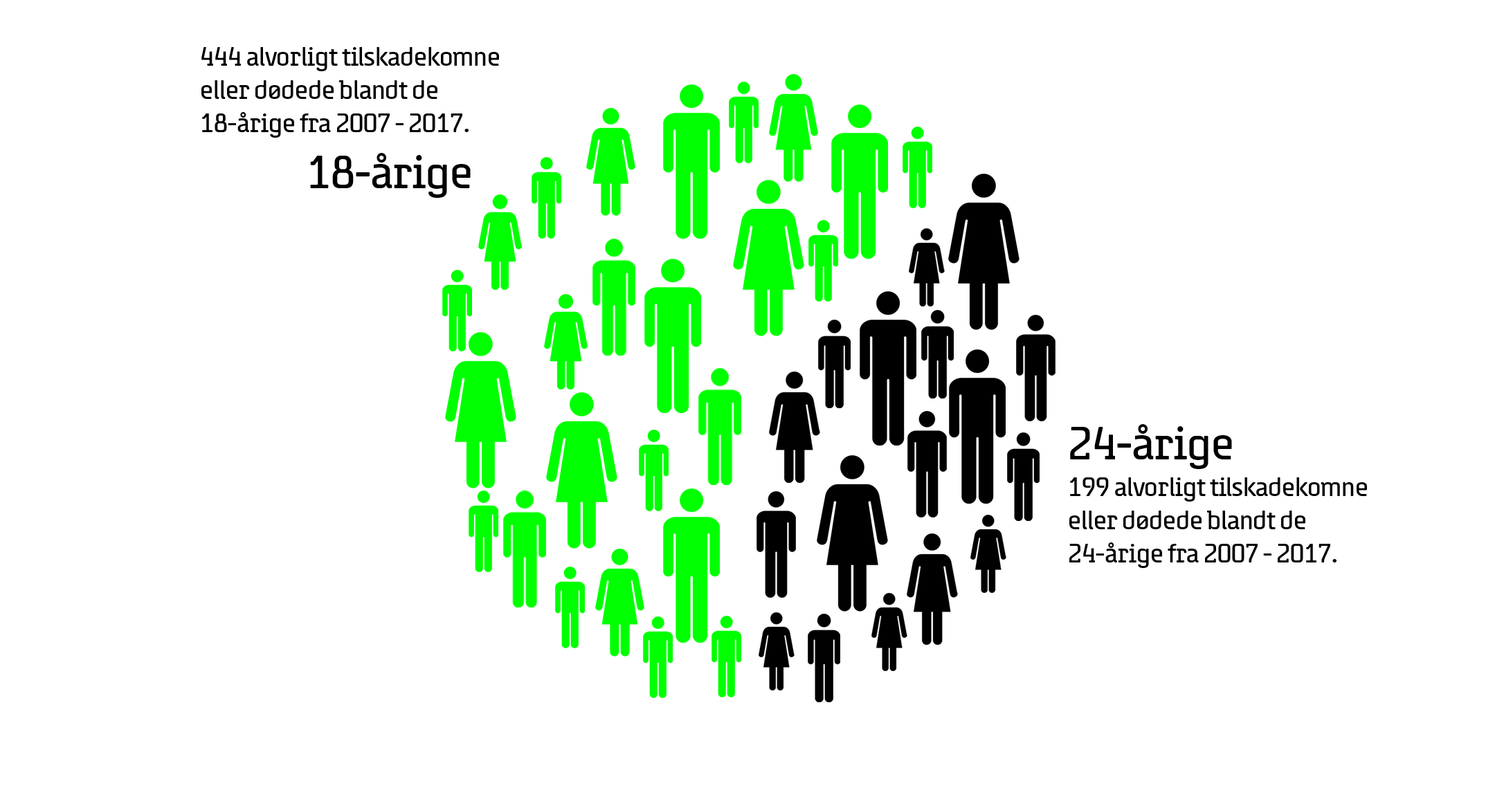
<style>
.page{position:relative;width:1495px;height:797px;background:#ffffff}
.page>*{position:absolute;margin:0}
.t1{font:27.7px "Safety";color:#000000}
.t2{font:48.5px "Safety";color:#000000}
</style>
<div class="page">
<p class="t1" style="left:201px;top:47px;width:298px;height:91px">444 alvorligt tilskadekomne<br>eller dødede blandt de 18-årige fra 2007 - 2017.</p>
<p class="t2" style="left:310px;top:153px;width:161px;height:45px">18-årige</p>
<p class="t2" style="left:1070px;top:424px;width:162px;height:45px">24-årige</p>
<p class="t1" style="left:1070px;top:478px;width:297px;height:90px">199 alvorligt tilskadekomne<br>eller dødede blandt de 24-årige fra 2007 - 2017.</p>
</div>
